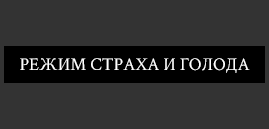
<style>
.page{position:relative;width:269px;height:129px;background:#333333}
.page>*{position:absolute;margin:0}
.t1{font:18px "CrimsonText-Regular";color:#ffffff}
</style>
<div class="page">
<p class="t1" style="left:20px;top:58px;width:230px;height:15px">РЕЖИМ СТРАХА И ГОЛОДА</p>
</div>
